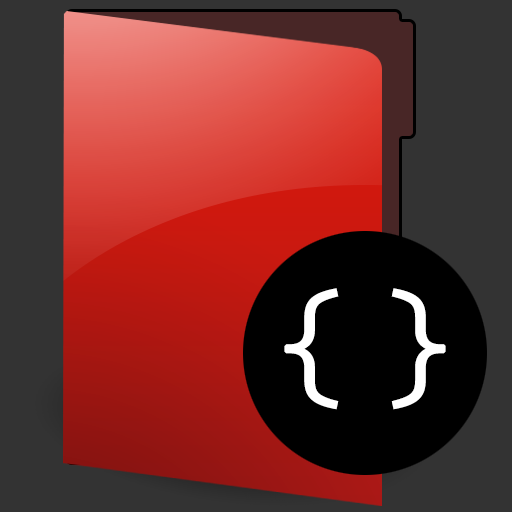
<style>
.page{position:relative;width:512px;height:512px;background:#333333}
.page>*{position:absolute;margin:0}
.t1{font:136px "Gotham-Light";letter-spacing:-0.02em;color:#ffffff;font-weight:bold}
</style>
<div class="page">
<p class="t1" style="left:284px;top:288px;width:162px;height:122px">{ }</p>
</div>
